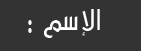
<style>
.page{position:relative;width:141px;height:51px;background:#333333}
.page>*{position:absolute;margin:0}
.t1{font:43.3px "MO_Nawel";letter-spacing:-0.08em;color:#ffffff;scale:0.89 1}
.t2{font:67.5px "MO_Nawel";letter-spacing:-0.08em;color:#ffffff;scale:0.58 1}
</style>
<div class="page">
<p class="t1" style="left:44px;top:9px;width:56px;height:29px">ا لإ سم</p>
<p class="t2" style="left:28px;top:20px;width:4px;height:13px">:</p>
</div>
